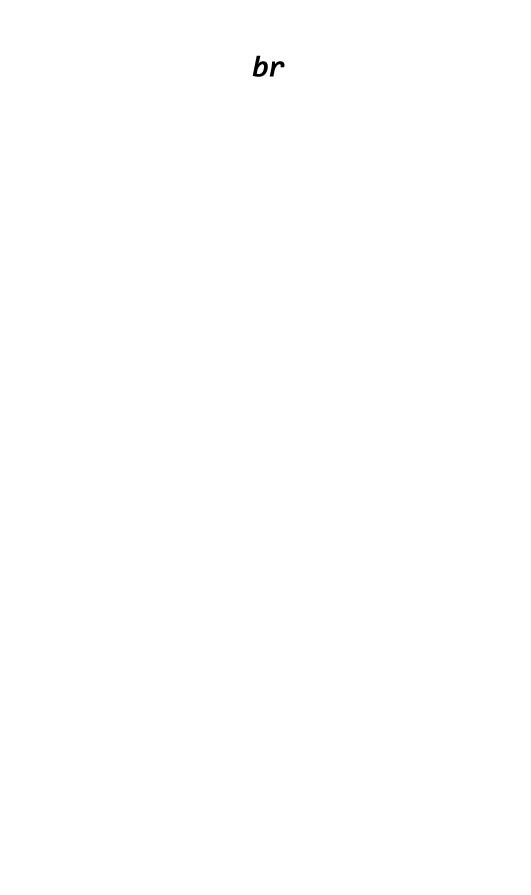
<style>
.page{position:relative;width:531px;height:895px;background:#ffffff}
.page>*{position:absolute;margin:0}
.t1{font:30px "Consolas-BoldItalic";color:#000000}
</style>
<div class="page">
<p class="t1" style="left:252px;top:55px;width:33px;height:22px">br</p>
</div>
